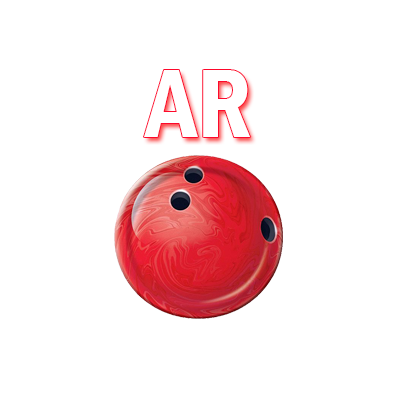
<style>
.page{position:relative;width:400px;height:400px;background:#ffffff}
.page>*{position:absolute;margin:0}
.t1{font:100px "FranklinGothic-DemiCond";color:#ffffff}
</style>
<div class="page">
<p class="t1" style="left:144px;top:70px;width:107px;height:67px">AR</p>
</div>
